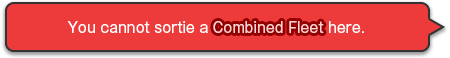
<style>
.page{position:relative;width:450px;height:58px;background:#ed3b3b}
.page>*{position:absolute;margin:0}
.t1{font:14px "GothicMB101Pro-Regular";color:#ffffff}
.t2{font:14px "GothicMB101Pro-Regular";color:#ffd3d3}
</style>
<div class="page">
<p class="t1" style="left:67px;top:21px;width:297px;height:12px">You cannot sortie a <span class="t2">Combined Fleet</span> here.</p>
<p class="t1" style="left:67px;top:21px;width:297px;height:12px">You cannot sortie a <span class="t2">Combined Fleet</span> here.</p>
</div>
